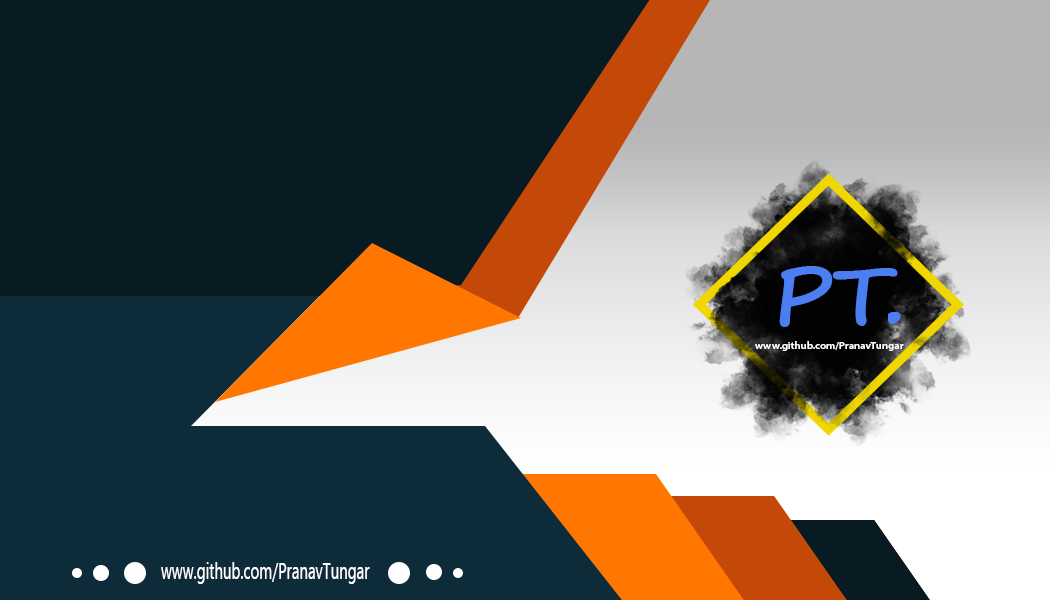
<style>
.page{position:relative;width:1050px;height:600px;background:#081b22}
.page>*{position:absolute;margin:0}
.t1{font:82px "SegoePrint-Bold";color:#4b7ef1;scale:1.03 1}
.t2{font:10.4px "MyriadPro-Semibold";color:#fefefe;scale:1.04 1}
.t3{font:23px "MyanmarText";color:#fefefe;scale:0.65 1}
</style>
<div class="page">
<p class="t1" style="left:779px;top:266px;width:122px;height:61px">PT.</p>
<p class="t2" style="left:755px;top:341px;width:149px;height:10px">www.github.com/PranavTungar</p>
<p class="t3" style="left:161px;top:562px;width:209px;height:22px">www.github.com/PranavTungar</p>
</div>
